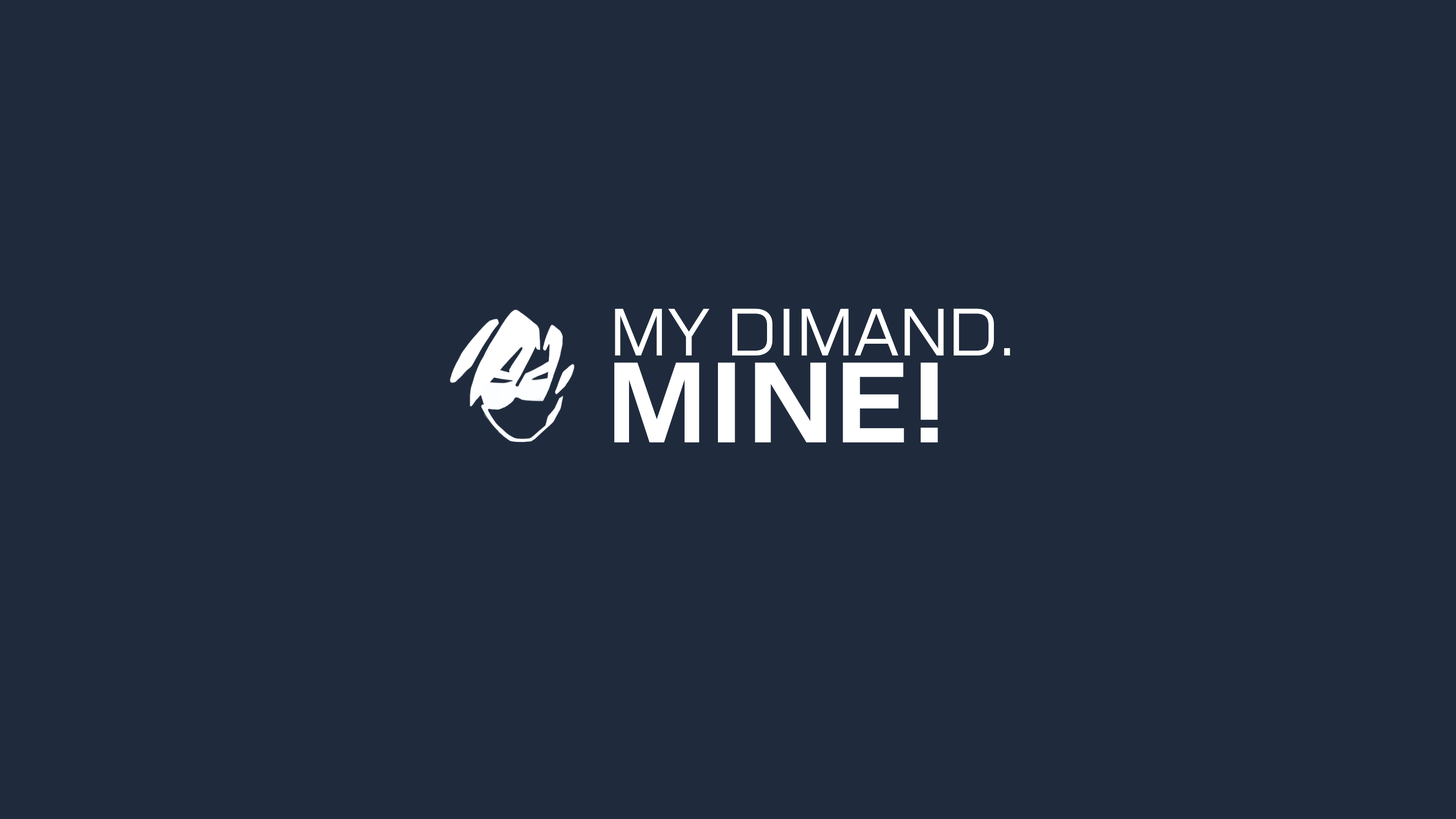
<style>
.page{position:relative;width:1456px;height:819px;background:#1f2b3d}
.page>*{position:absolute;margin:0}
.t1{font:64.8px "FZXINZYHS-R--GB1-0";color:#ffffff;text-transform:uppercase}
.t2{font:110.7px "FZXINZYHS-SB--GB1-0";color:#ffffff;text-transform:uppercase}
</style>
<div class="page">
<p class="t1" style="left:615px;top:308px;width:395px;height:48px">My Dimand.</p>
<p class="t2" style="left:614px;top:362px;width:324px;height:80px">Mine!</p>
</div>
